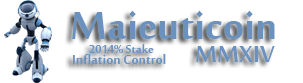
<style>
.page{position:relative;width:303px;height:83px;background:#ffffff}
.page>*{position:absolute;margin:0}
.t1{font:60px "MoolBoran";color:#6b91be}
.t2{font:20px "MoolBoran";color:#6b91be}
.t3{font:18px "MoolBoran";color:#6b91be}
.t4{font:36px "MoolBoran";color:#6b91be}
</style>
<div class="page">
<p class="t1" style="left:72px;top:10px;width:203px;height:29px">Maieuticoin</p>
<p class="t2" style="left:72px;top:53px;width:94px;height:12px">Inflation Control</p>
<p class="t3" style="left:89px;top:44px;width:65px;height:9px">2014% Stake</p>
<p class="t4" style="left:196px;top:46px;width:79px;height:16px">MMXIV</p>
</div>
